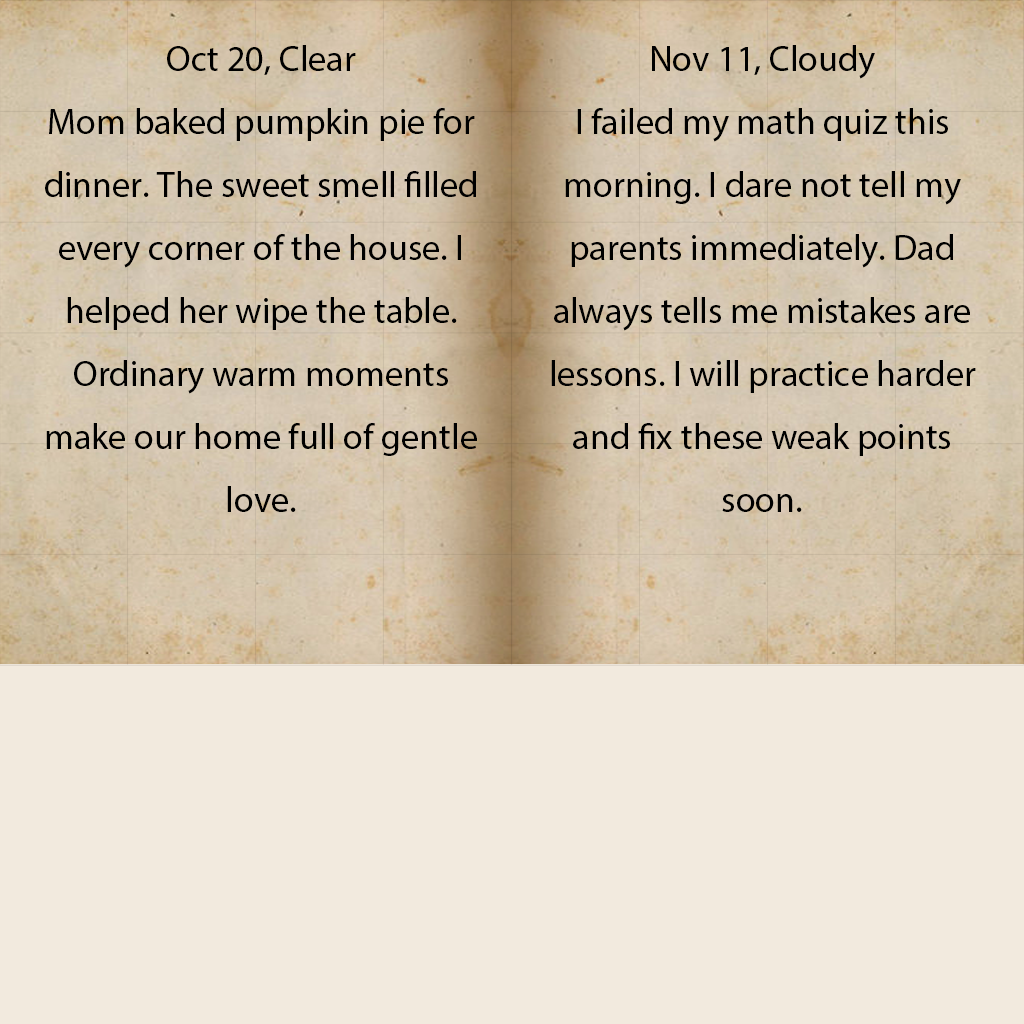
<style>
.page{position:relative;width:1024px;height:1024px;background:#f2eade}
.page>*{position:absolute;margin:0}
.t1{font:36px "MyriadPro-Regular";color:#000000}
</style>
<div class="page">
<p class="t1" style="left:45px;top:45px;width:432px;height:467px;text-align:center">Oct 20, Clear<br>Mom baked pumpkin pie for dinner. The sweet smell filled every corner of the house. I helped her wipe the table. Ordinary warm moments make our home full of gentle love.</p>
<p class="t1" style="left:551px;top:45px;width:425px;height:467px;text-align:center">Nov 11, Cloudy<br>I failed my math quiz this morning. I dare not tell my parents immediately. Dad always tells me mistakes are lessons. I will practice harder and fix these weak points soon.</p>
</div>
